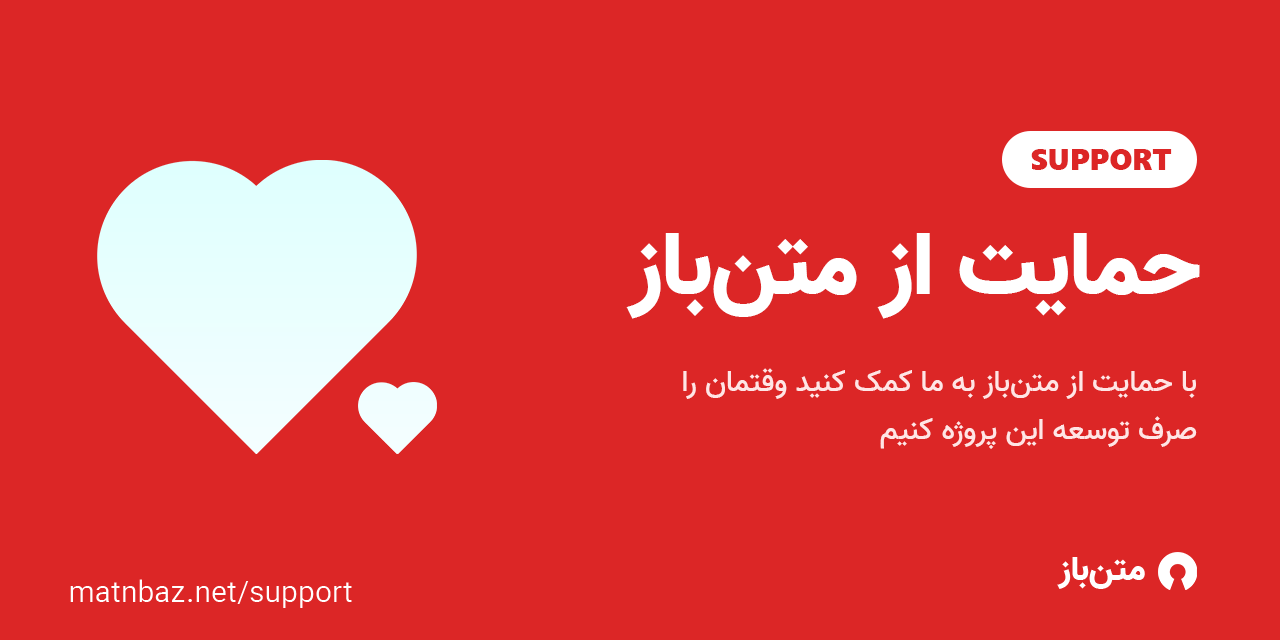
<style>
.page{position:relative;width:1280px;height:640px;background:#dc2626}
.page>*{position:absolute;margin:0}
.t1{font:30px "SegoeUIBlack";color:#dc2626}
.t2{font:90px "Vazir-Black";color:#ffffff}
.t3{font:30px/48px "Vazir-Medium";color:#ffe5e5}
.t4{font:34.2px "Vazir-Black";color:#ffffff}
.t5{font:30px "Vazir-Light";color:#ffffff}
</style>
<div class="page">
<p class="t1" style="left:1031px;top:149px;width:141px;height:21px">SUPPORT</p>
<p class="t2" style="left:626px;top:233px;width:574px;height:86px">حمایت از متن‌باز</p>
<p class="t3" style="left:683px;top:368px;width:514px;height:81px;text-align:right">با حمایت از متن‌باز به ما کمک کنید وقتمان را صرف توسعه این پروژه کنیم</p>
<p class="t4" style="left:1057px;top:557px;width:88px;height:32px">متن‌باز</p>
<p class="t5" style="left:70px;top:579px;width:282px;height:29px">matnbaz.net/support</p>
</div>
